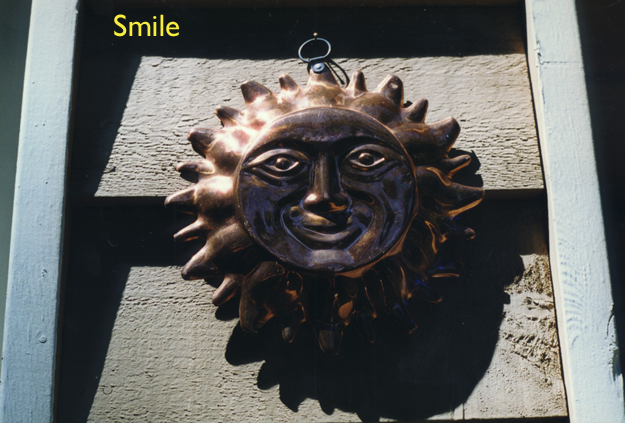
<style>
.page{position:relative;width:625px;height:423px}
.page>*{position:absolute;margin:0}
.t1{font:31.2px "GillSansMT";color:#f8ed3c}
</style>
<div class="page">
<p class="t1" style="left:114px;top:14px;width:65px;height:23px">Smile</p>
</div>
